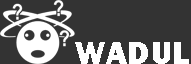
<style>
.page{position:relative;width:191px;height:64px;background:#333333}
.page>*{position:absolute;margin:0}
.t1{font:33.1px "FranklinGothic-Heavy";color:#ffffff}
</style>
<div class="page">
<p class="t1" style="left:75px;top:42px;width:114px;height:22px">WADUL</p>
</div>
